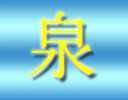
<style>
.page{position:relative;width:128px;height:100px}
.page>*{position:absolute;margin:0}
.t1{font:72px "MS-Mincho";color:#ffff00}
</style>
<div class="page">
<p class="t1" style="left:29px;top:12px;width:66px;height:66px">泉</p>
</div>
